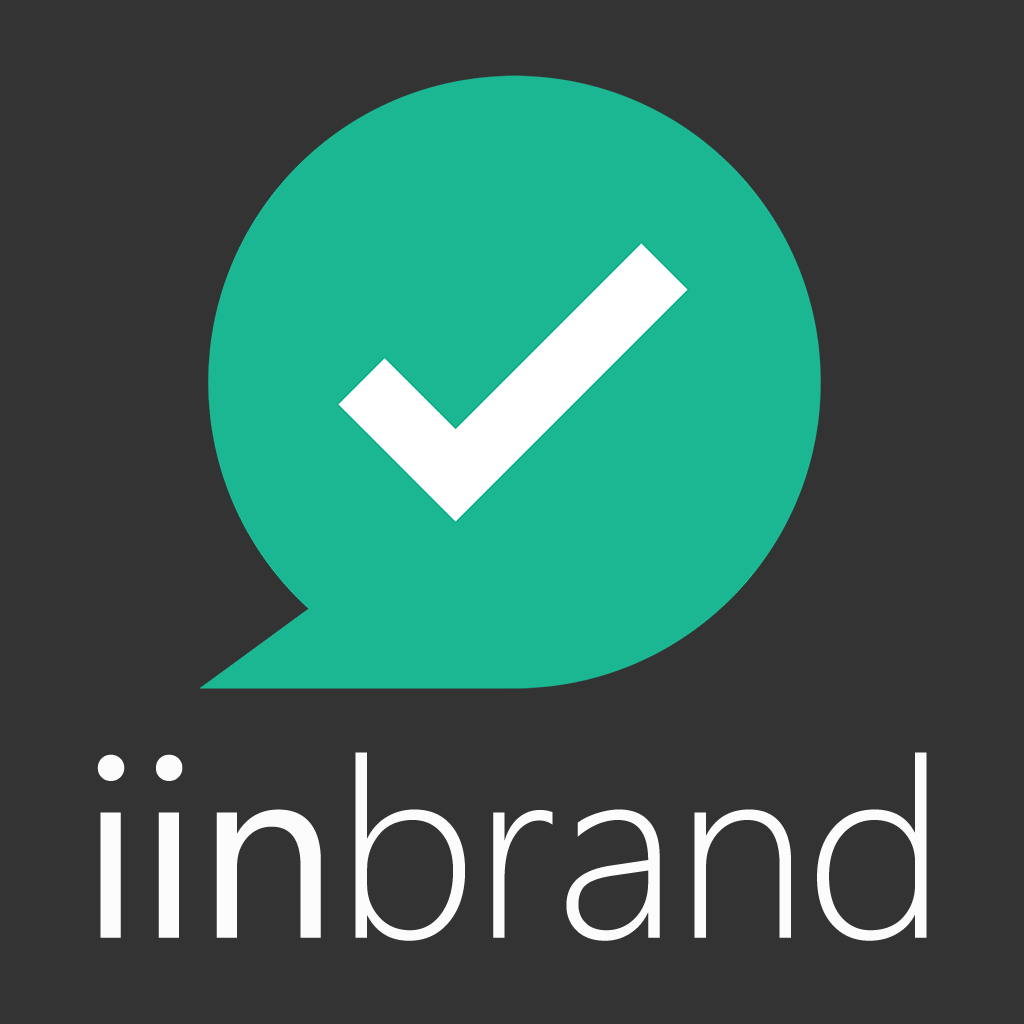
<style>
.page{position:relative;width:1024px;height:1024px;background:#333333}
.page>*{position:absolute;margin:0}
.t1{font:250px "SegoeUI-Light";letter-spacing:-0.01em;color:#fcfcfc}
.t2{font:250px "SegoeUI";letter-spacing:-0.01em;color:#fcfcfc}
</style>
<div class="page">
<p class="t1" style="left:97px;top:752px;width:830px;height:189px"><span class="t2">iin</span>brand</p>
</div>
